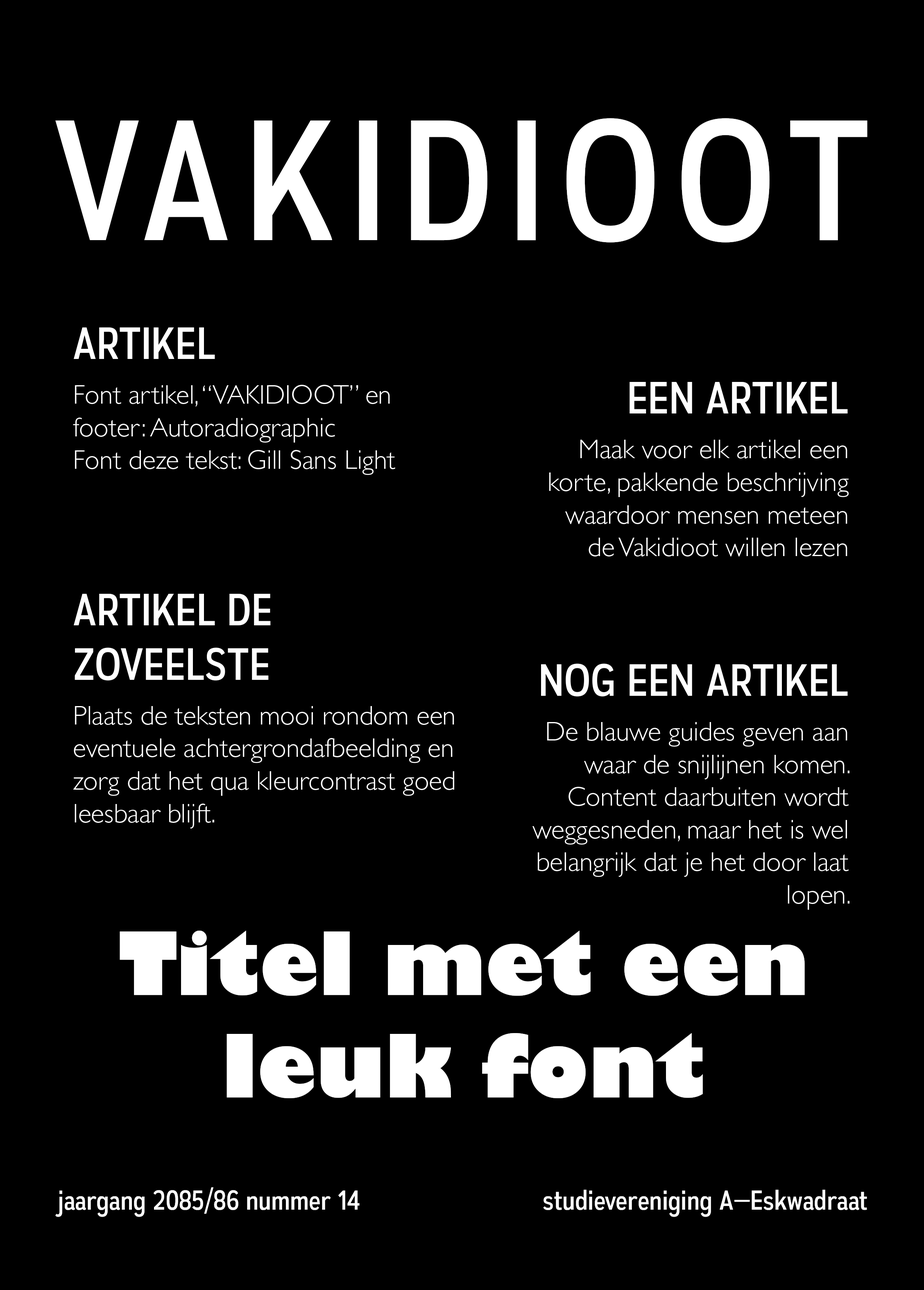
<style>
.page{position:relative;width:924px;height:1290px;background:#000000}
.page>*{position:absolute;margin:0}
.t1{font:170.7px "AutoradiographicRg-Regular";color:#ffffff}
.t2{font:27.2px "GillSans-Light";color:#ffffff}
.t3{font:45.3px "AutoradiographicRg-Regular";color:#ffffff}
.t4{font:85.4px "GillSans-UltraBold";color:#ffffff}
.t5{font:27.3px "AutoradiographicRg-Regular";color:#ffffff}
</style>
<div class="page">
<p class="t1" style="left:55px;top:118px;width:813px;height:125px">VAKIDIOOT</p>
<p class="t2" style="left:73px;top:327px;width:322px;height:148px"><span class="t3">ARTIKEL<br><br></span>Font artikel, “VAKIDIOOT” en footer: Autoradiographic<br>Font deze tekst: Gill Sans Light</p>
<p class="t2" style="left:549px;top:382px;width:300px;height:174px;text-align:right"><span class="t3">EEN ARTIKEL<br><br></span>Maak voor elk artikel een korte, pakkende beschrijving waardoor mensen meteen de Vakidioot willen lezen</p>
<p class="t2" style="left:73px;top:594px;width:381px;height:235px"><span class="t3">ARTIKEL DE ZOVEELSTE<br><br></span>Plaats de teksten mooi rondom een eventuele achtergrondafbeelding en zorg dat het qua kleurcontrast goed leesbaar blijft.</p>
<p class="t2" style="left:533px;top:663px;width:317px;height:247px;text-align:right"><span class="t3">NOG EEN ARTIKEL<br><br></span>De blauwe guides geven aan waar de snijlijnen komen. Content daarbuiten wordt weggesneden, maar het is wel belangrijk dat je het door laat lopen.</p>
<p class="t4" style="left:120px;top:931px;width:685px;height:167px;text-align:center">Titel met een leuk font</p>
<p class="t5" style="left:55px;top:1187px;width:305px;height:30px">jaargang 2085/86 nummer 14</p>
<p class="t5" style="left:543px;top:1190px;width:324px;height:27px">studievereniging A—Eskwadraat</p>
</div>
